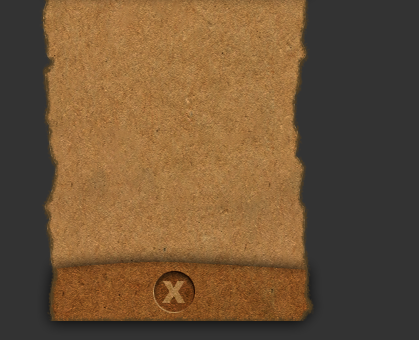
<style>
.page{position:relative;width:419px;height:340px;background:#333333}
.page>*{position:absolute;margin:0}
.t1{font:30px "Arial-Black";color:#a47741}
</style>
<div class="page">
<p class="t1" style="left:162px;top:281px;width:24px;height:22px">X</p>
</div>
